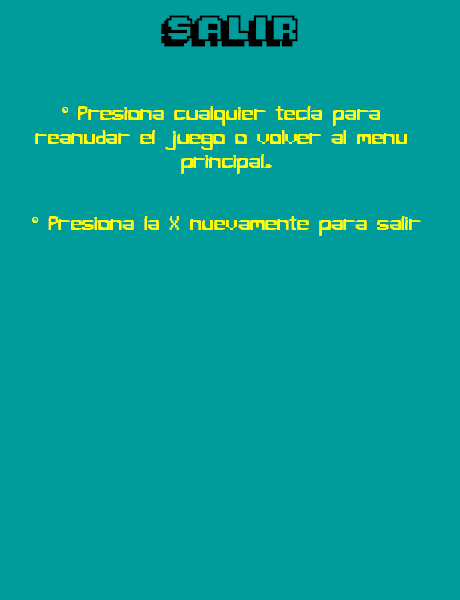
<style>
.page{position:relative;width:460px;height:600px;background:#009b9b}
.page>*{position:absolute;margin:0}
.t1{font:20px "Pixelmania";color:#000000}
.t2{font:20px "PixelBug";color:#ffff00}
.t3{font:32px "PacFont";color:#ffff00}
</style>
<div class="page">
<p class="t1" style="left:161px;top:15px;width:137px;height:32px">SALIR</p>
<p class="t2" style="left:32px;top:106px;width:389px;height:130px;text-align:center"><span class="t3">2 </span>Presiona cualquier tecla para <br>reanudar el juego o volver al menu <br>principal.<br><br><span class="t3">2 </span>Presiona la X nuevamente para salir</p>
</div>
